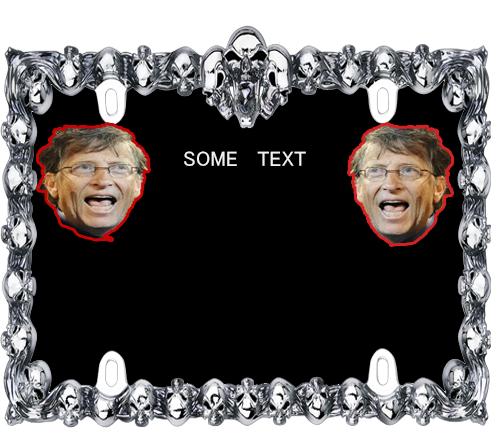
<style>
.page{position:relative;width:491px;height:442px;background:#000000}
.page>*{position:absolute;margin:0}
.t1{font:21px "MS-PGothic";color:#f1f1f0}
</style>
<div class="page">
<p class="t1" style="left:184px;top:151px;width:122px;height:15px">SOME   TEXT</p>
</div>
